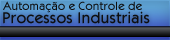
<style>
.page{position:relative;width:170px;height:40px}
.page>*{position:absolute;margin:0}
.t1{font:12px "KabobRegular";color:#0e0e0f}
.t2{font:16px "KabobRegular";color:#0e0e0f}
</style>
<div class="page">
<p class="t1" style="left:3px;top:1px;width:139px;height:12px">Automação e Controle de</p>
<p class="t2" style="left:3px;top:11px;width:147px;height:13px">Processos Industriais</p>
</div>
